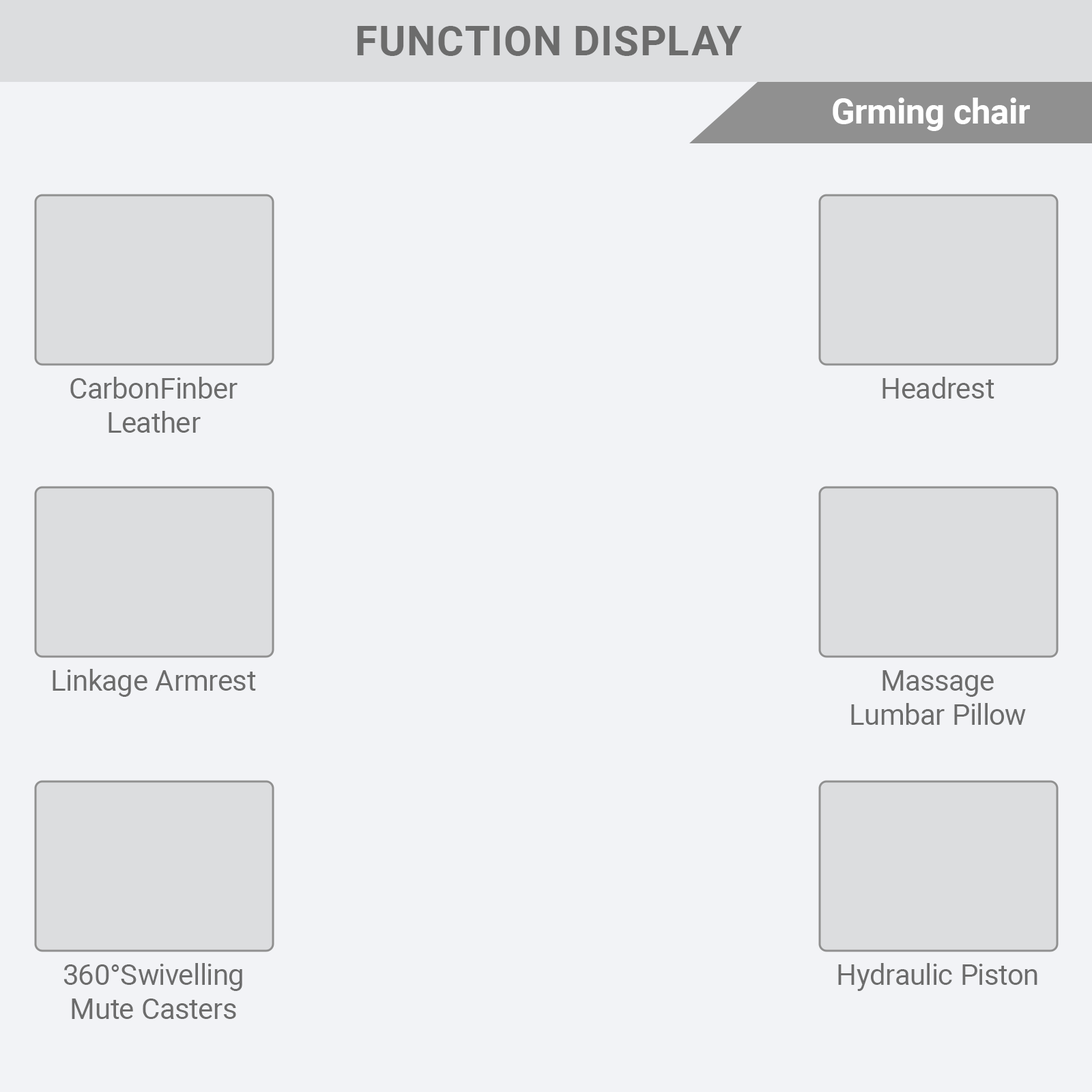
<style>
.page{position:relative;width:1092px;height:1092px;background:#f2f3f6}
.page>*{position:absolute;margin:0}
.t1{font:40.9px "Roboto-Bold";color:#6c6c6c;text-transform:uppercase}
.t2{font:34.8px "Roboto-Bold";color:#ffffff}
.t3{font:28.7px "Roboto-Regular";color:#6c6c6c}
</style>
<div class="page">
<p class="t1" style="left:357px;top:26px;width:385px;height:30px">Function display</p>
<p class="t2" style="left:833px;top:98px;width:197px;height:33px">Grming chair</p>
<p class="t3" style="left:70px;top:377px;width:168px;height:56px;text-align:center">CarbonFinber<br>Leather</p>
<p class="t3" style="left:882px;top:377px;width:112px;height:22px">Headrest</p>
<p class="t3" style="left:53px;top:669px;width:203px;height:28px">Linkage Armrest</p>
<p class="t3" style="left:851px;top:670px;width:175px;height:55px;text-align:center">Massage<br>Lumbar Pillow</p>
<p class="t3" style="left:63px;top:963px;width:179px;height:56px;text-align:center">360°Swivelling<br>Mute Casters</p>
<p class="t3" style="left:838px;top:963px;width:199px;height:28px">Hydraulic Piston</p>
</div>
